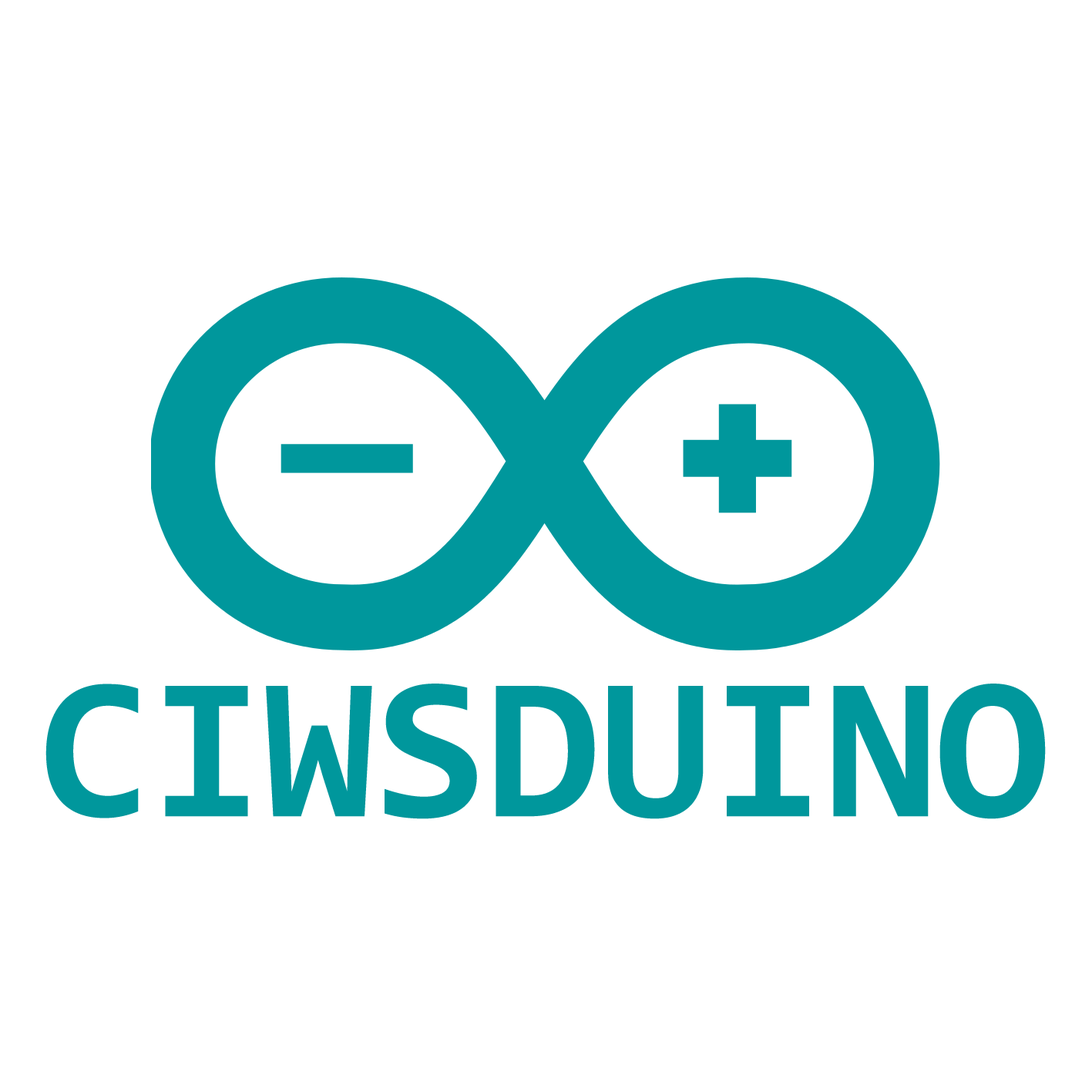
<style>
.page{position:relative;width:1092px;height:1092px;background:#ffffff}
.page>*{position:absolute;margin:0}
.t1{font:204.2px "Consolas-Bold";color:#00979c}
</style>
<div class="page">
<p class="t1" style="left:45px;top:684px;width:1001px;height:135px">CIWSDUINO</p>
</div>
